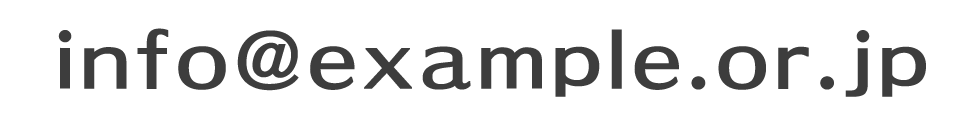
<style>
.page{position:relative;width:978px;height:126px;background:#ffffff}
.page>*{position:absolute;margin:0}
.t1{font:76px "C4-GothicDeux-E-04";letter-spacing:0.1em;color:#3d3d3d}
</style>
<div class="page">
<p class="t1" style="left:58px;top:28px;width:868px;height:69px">info@example.or.jp</p>
</div>
